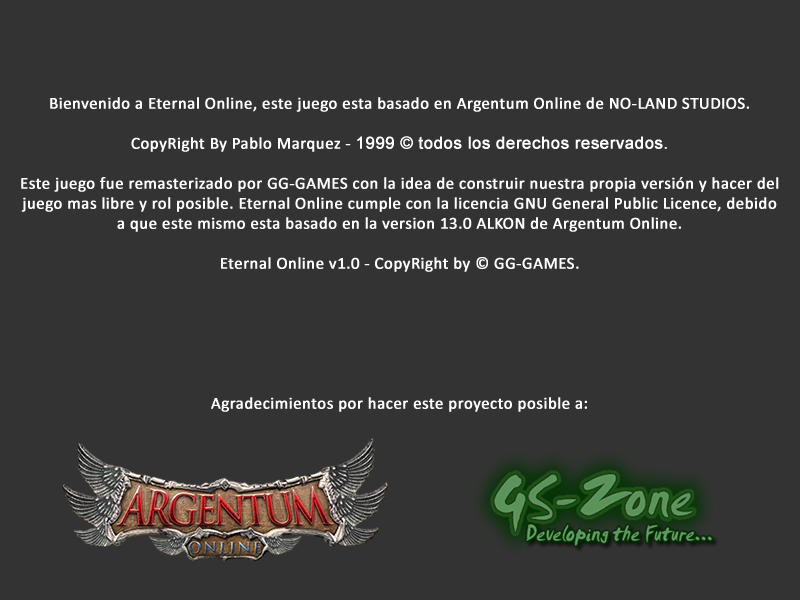
<style>
.page{position:relative;width:800px;height:600px;background:#333333}
.page>*{position:absolute;margin:0}
.t1{font:16.7px "Calibri";letter-spacing:0.01em;color:#ffffff;font-weight:bold}
.t2{font:16.7px "ArialMT";letter-spacing:0.01em;color:#ffffff;font-weight:bold}
</style>
<div class="page">
<p class="t1" style="left:21px;top:97px;width:758px;height:315px;text-align:center">Bienvenido a Eternal Online, este juego esta basado en Argentum Online de NO-LAND STUDIOS.<br><br>CopyRight By Pablo Marquez - <span class="t2">1999 © todos los derechos reservados.<br><br></span>Este juego fue remasterizado por GG-GAMES con la idea de construir nuestra propia versión y hacer del juego mas libre y rol posible. Eternal Online cumple con la licencia GNU General Public Licence, debido a que este mismo esta basado en la version 13.0 ALKON de Argentum Online.<br><br>Eternal Online v1.0 - CopyRight by © GG-GAMES.<br><br><br><br><br><br><br>Agradecimientos por hacer este proyecto posible a:</p>
</div>
